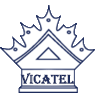
<style>
.page{position:relative;width:96px;height:96px;background:#ffffff}
.page>*{position:absolute;margin:0}
.t1{font:13.2px "Algerian";color:#1f2c5c}
</style>
<div class="page">
<p class="t1" style="left:20px;top:72px;width:55px;height:12px">VICATEL</p>
</div>
